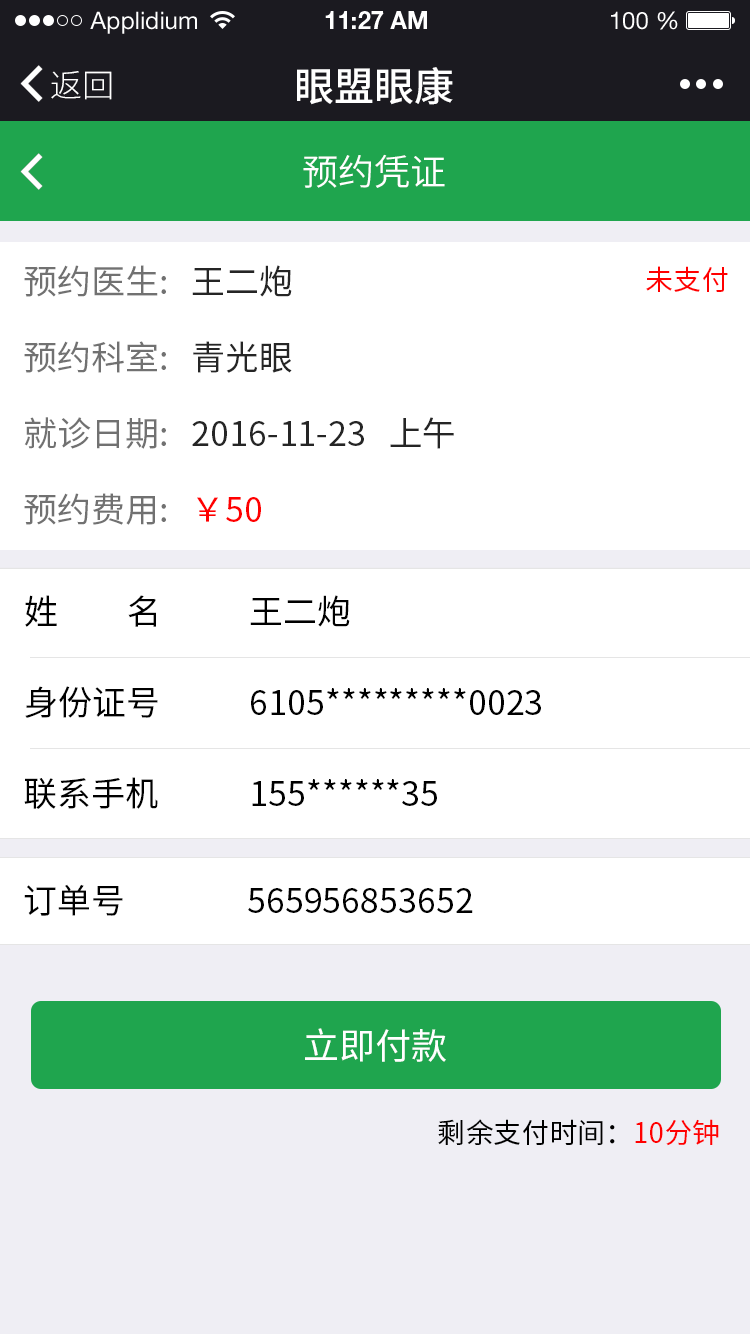
<style>
.page{position:relative;width:750px;height:1334px;background:#ffffff}
.page>*{position:absolute;margin:0}
.t1{font:24px "HelveticaNeueLTStd-Roman";color:#ffffff}
.t2{font:24px "HelveticaNeueLTStd-Bd";color:#ffffff}
.t3{font:32px "SourceHanSansCN-Light";color:#ffffff}
.t4{font:40px "SourceHanSansCN-Medium";color:#ffffff}
.t5{font:36px "SourceHanSansCN-Normal";color:#ffffff}
.t6{font:34px/80px "SourceHanSansCN-Regular";color:#252525}
.t7{font:34px/80px "SourceHanSansCN-Regular";color:#717171}
.t8{font:34px/80px "SourceHanSansCN-Regular";color:#ff0000}
.t9{font:28px "SourceHanSansCN-Regular";color:#ff0000}
.t10{font:34.1px "SourceHanSansCN-Regular";color:#000000}
.t11{font:34px "SourceHanSansCN-Regular";color:#000000}
.t12{font:36px "SourceHanSansCN-Regular";color:#ffffff}
.t13{font:28px "SourceHanSansCN-Regular";color:#000000}
</style>
<div class="page">
<p class="t1" style="left:90px;top:11px;width:107px;height:23px">Applidium</p>
<p class="t2" style="left:325px;top:11px;width:102px;height:18px">11:27 AM</p>
<p class="t1" style="left:611px;top:11px;width:67px;height:19px">100 %</p>
<p class="t3" style="left:51px;top:71px;width:61px;height:29px">返回</p>
<p class="t4" style="left:297px;top:67px;width:156px;height:38px">眼盟眼康</p>
<p class="t5" style="left:303px;top:154px;width:142px;height:34px">预约凭证</p>
<p class="t6" style="left:24px;top:265px;width:430px;height:260px"><span class="t7">预约医生:   </span>王二炮<br><span class="t7">预约科室:   </span>青光眼<br><span class="t7">就诊日期:   </span>2016-11-23   上午<br><span class="t7">预约费用:   </span><span class="t8">￥50</span></p>
<p class="t9" style="left:646px;top:266px;width:82px;height:26px">未支付</p>
<p class="t10" style="left:25px;top:595px;width:131px;height:32px">姓         名</p>
<p class="t10" style="left:250px;top:595px;width:100px;height:32px">王二炮</p>
<p class="t10" style="left:25px;top:686px;width:133px;height:32px">身份证号</p>
<p class="t10" style="left:251px;top:688px;width:290px;height:27px">6105*********0023</p>
<p class="t10" style="left:24px;top:777px;width:134px;height:32px">联系手机</p>
<p class="t10" style="left:252px;top:779px;width:185px;height:27px">155******35</p>
<p class="t11" style="left:24px;top:884px;width:99px;height:32px">订单号</p>
<p class="t11" style="left:248px;top:888px;width:225px;height:25px">565956853652</p>
<p class="t12" style="left:305px;top:1028px;width:141px;height:34px">立即付款</p>
<p class="t13" style="left:438px;top:1119px;width:281px;height:27px">剩余支付时间：<span class="t9">10分钟</span></p>
</div>
